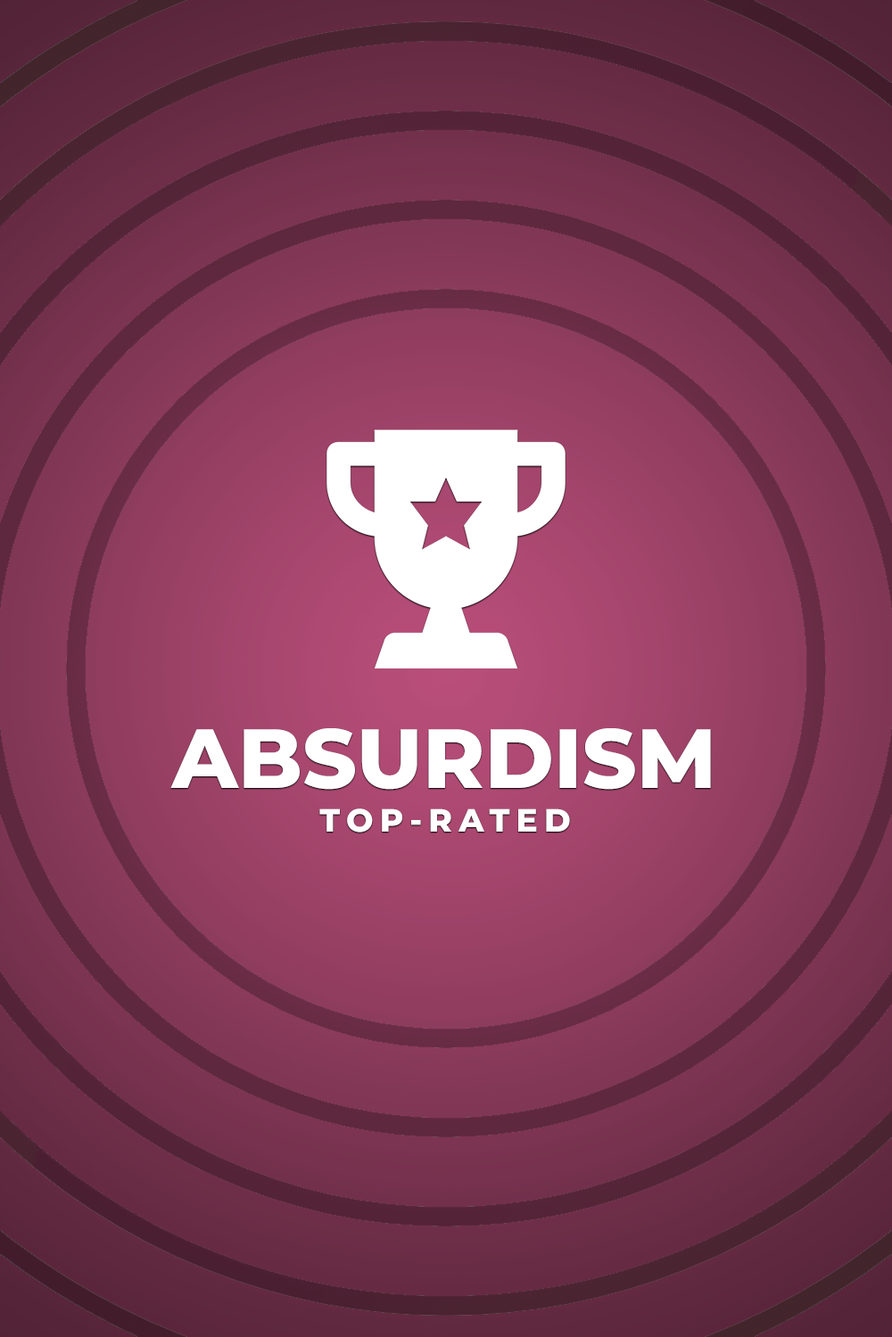
<style>
.page{position:relative;width:892px;height:1337px}
.page>*{position:absolute;margin:0}
.t1{font:83.8px "MontserratRoman-ExtraBold";color:#ffffff}
.t2{font:32.1px "MontserratRoman-ExtraBold";letter-spacing:0.2em;color:#ffffff}
</style>
<div class="page">
<p class="t1" style="left:170px;top:728px;width:541px;height:62px">ABSURDISM</p>
<p class="t2" style="left:319px;top:809px;width:251px;height:24px">TOP-RATED</p>
</div>
